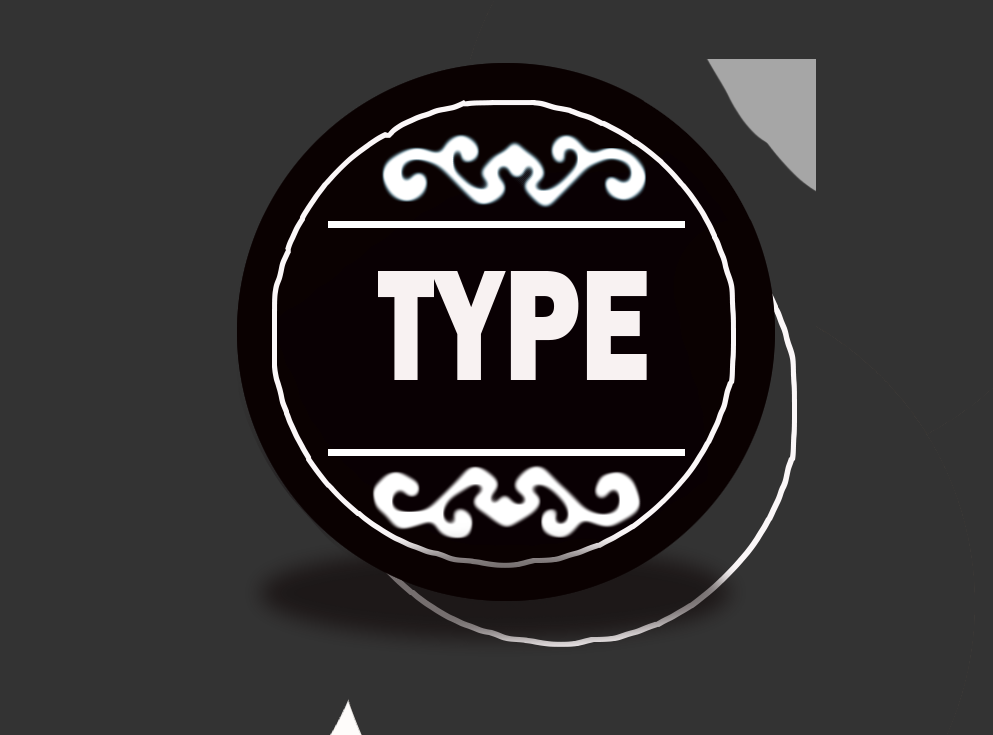
<style>
.page{position:relative;width:993px;height:735px;background:#333333}
.page>*{position:absolute;margin:0}
.t1{font:162.5px "FranklinGothic-Heavy";color:#f8f2f2;scale:0.73 1}
</style>
<div class="page">
<p class="t1" style="left:378px;top:271px;width:269px;height:109px">TYPE</p>
</div>
